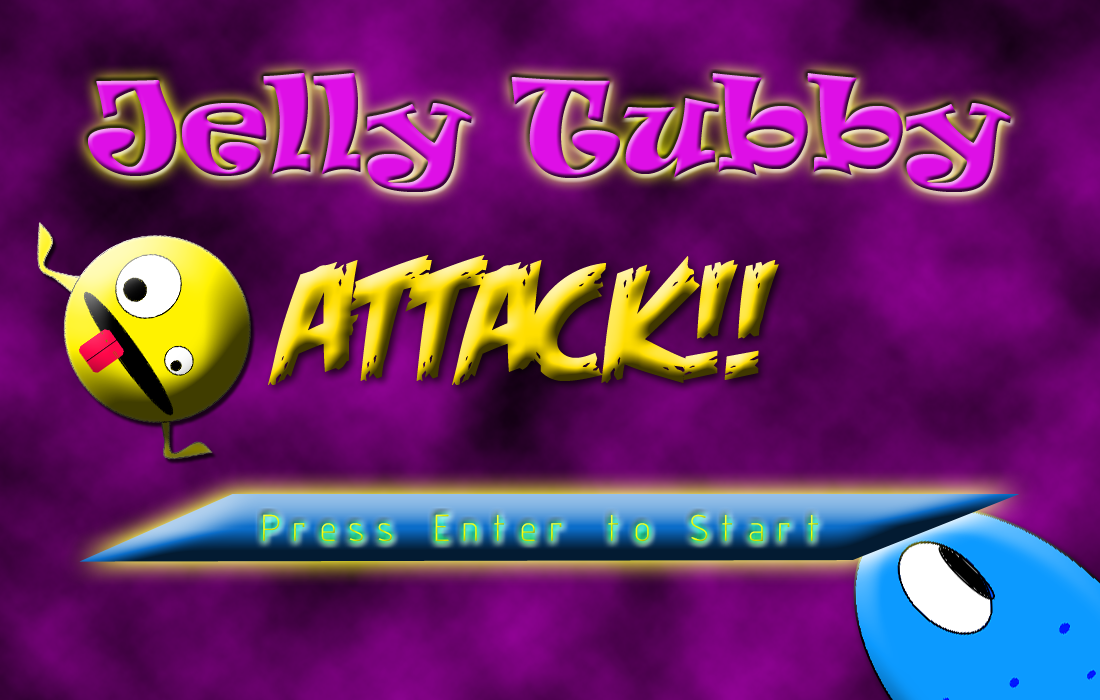
<style>
.page{position:relative;width:1100px;height:700px}
.page>*{position:absolute;margin:0}
.t1{font:120px "Ravie"}
.t2{font:170px "FeastofFleshBBItalic"}
.t3{font:36px "ISOCT2_IV25"}
</style>
<div class="page">
<p class="t1" style="left:88px;top:73px;width:923px;height:119px">Jelly Tubby</p>
<p class="t2" style="left:268px;top:255px;width:511px;height:130px">ATTACK!!</p>
<p class="t3" style="left:263px;top:514px;width:555px;height:28px">Press Enter to Start</p>
</div>
